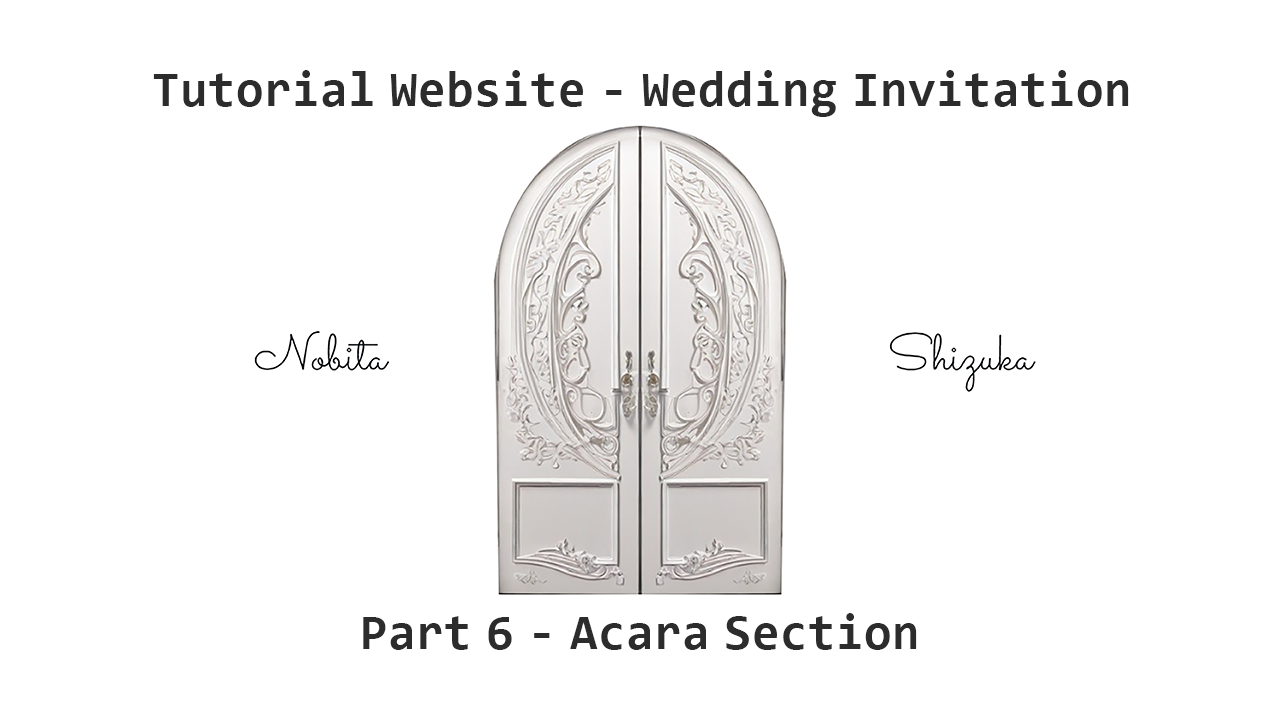
<style>
.page{position:relative;width:1280px;height:720px;background:#ffffff}
.page>*{position:absolute;margin:0}
.t1{font:50px "Consolas-Bold";letter-spacing:0.01em;color:#2c2c2c}
</style>
<div class="page">
<p class="t1" style="left:153px;top:70px;width:976px;height:47px">Tutorial Website - Wedding Invitation</p>
<p class="t1" style="left:363px;top:613px;width:554px;height:37px">Part 6 - Acara Section</p>
</div>
